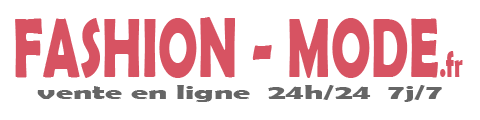
<style>
.page{position:relative;width:480px;height:120px;background:#ffffff}
.page>*{position:absolute;margin:0}
.t1{font:84.8px "BerlinSansFBDemi-Bold";color:#d75362;scale:0.63 1}
.t2{font:36.4px "BerlinSansFBDemi-Bold";color:#d75362;scale:0.63 1}
.t3{font:20.4px "BerlinSansFBDemi-Bold";color:#666666;scale:1.68 1}
</style>
<div class="page">
<p class="t1" style="left:15px;top:17px;width:448px;height:61px">FASHION - MODE<span class="t2">.fr</span></p>
<p class="t3" style="left:37px;top:85px;width:405px;height:17px">vente en ligne  24h/24  7j/7</p>
</div>
